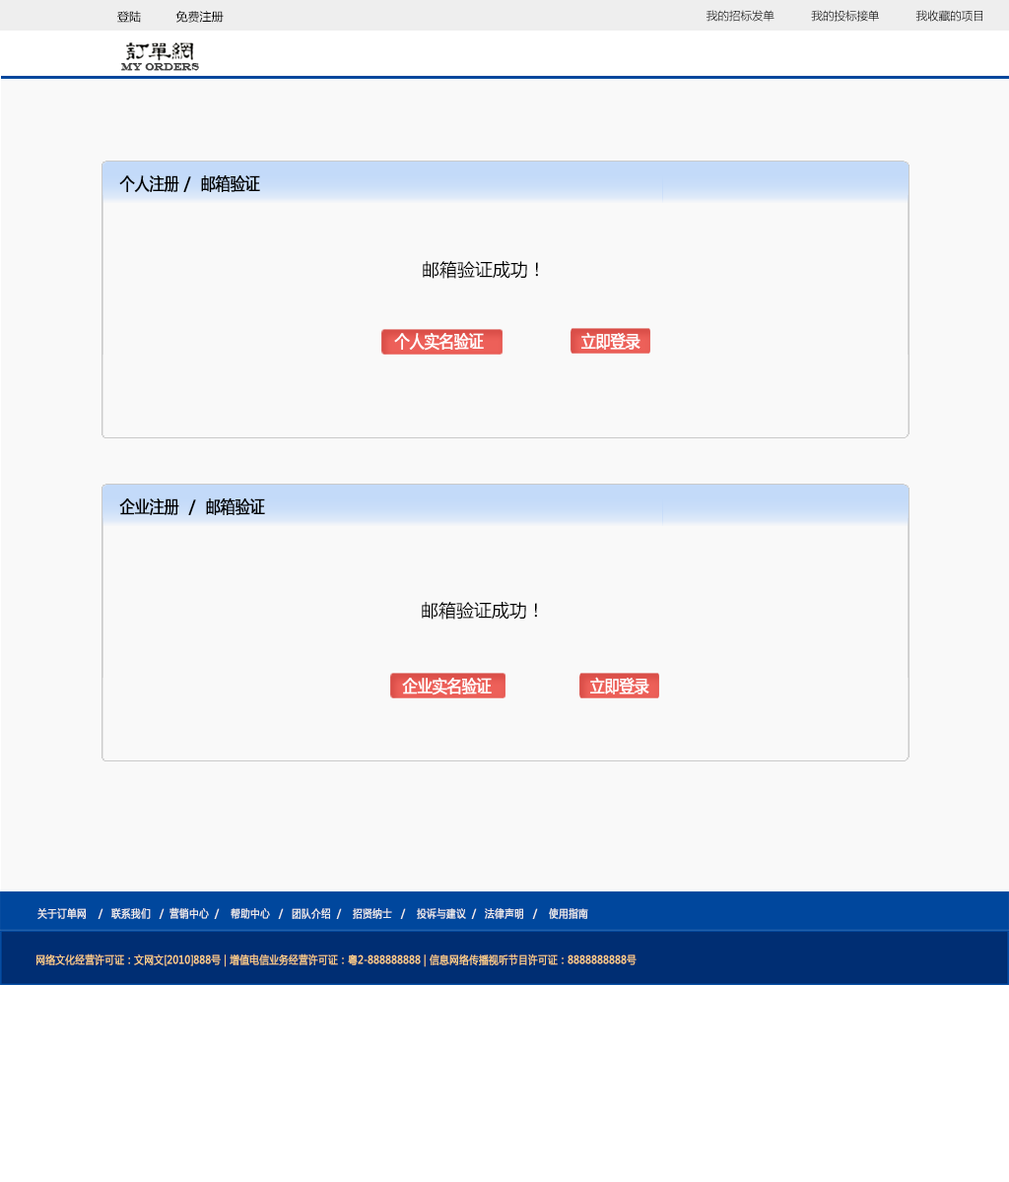
<style>
.page{position:relative;width:1009px;height:1182px;background:#f9f9f9}
.page>*{position:absolute;margin:0}
.t1{font:11.8px "MicrosoftYaHei";color:#000000}
.t2{font:11.3px "MicrosoftYaHei";color:#000000}
.t3{font:10.8px "EngraversMT";color:#434343;font-variant:small-caps;font-weight:bold;scale:0.86 1}
.t4{font:17.2px "MicrosoftYaHei";color:#000000;font-variant:small-caps;font-weight:bold;scale:0.86 1}
.t5{font:17.7px "MicrosoftYaHei";color:#000000}
.t6{font:17.2px "MicrosoftYaHei";color:#ffffff;font-variant:small-caps;font-weight:bold;scale:0.86 1}
.t7{font:10.8px "MicrosoftYaHei";color:#eeeeee;font-variant:small-caps;font-weight:bold;scale:0.86 1}
.t8{font:15.2px "STXihei";color:#eeeeee;font-variant:small-caps;font-weight:bold;scale:0.86 1}
.t9{font:10.8px "MicrosoftYaHei";color:#facd89;font-variant:small-caps;font-weight:bold;scale:0.87 1}
.t10{font:10.8px "MicrosoftYaHei";color:#eeeeee;font-variant:small-caps;font-weight:bold;scale:0.87 1}
</style>
<div class="page">
<p class="t1" style="left:117px;top:11px;width:107px;height:12px">登陆          免费注册</p>
<p class="t2" style="left:706px;top:10px;width:276px;height:12px">我的招标发单           我的投标接单           我收藏的项目</p>
<p class="t3" style="left:121px;top:63px;width:78px;height:8px">MY ORDERS</p>
<p class="t4" style="left:119px;top:175px;width:141px;height:17px">个人注册 /  邮箱验证</p>
<p class="t5" style="left:423px;top:261px;width:115px;height:18px">邮箱验证成功！</p>
<p class="t6" style="left:394px;top:333px;width:90px;height:18px">个人实名验证</p>
<p class="t6" style="left:581px;top:332px;width:59px;height:18px">立即登录</p>
<p class="t4" style="left:119px;top:498px;width:146px;height:17px">企业注册  /  邮箱验证</p>
<p class="t5" style="left:422px;top:602px;width:115px;height:18px">邮箱验证成功！</p>
<p class="t6" style="left:402px;top:678px;width:90px;height:17px">企业实名验证</p>
<p class="t6" style="left:590px;top:677px;width:59px;height:17px">立即登录</p>
<p class="t7" style="left:37px;top:907px;width:551px;height:12px"><span class="t8"><br><br></span>关于订单网    /   联系我们   /  营销中心  /    帮助中心   /   团队介绍  /    招贤纳士   /    投诉与建议  /   法律声明   /    使用指南</p>
<p class="t9" style="left:36px;top:954px;width:600px;height:13px"><span class="t10"> </span>网络文化经营许可证：文网文[2010]888号 | 增值电信业务经营许可证：粤2-888888888 | 信息网络传播视听节目许可证：8888888888号</p>
</div>
